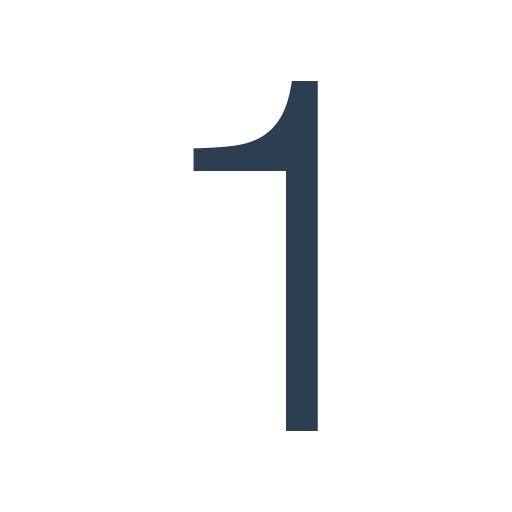
<style>
.page{position:relative;width:512px;height:512px;background:#ffffff}
.page>*{position:absolute;margin:0}
.t1{font:500px "HelveticaNeue-Light";color:#2c3e50}
</style>
<div class="page">
<p class="t1" style="left:193px;top:81px;width:125px;height:350px">1</p>
</div>
